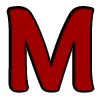
<style>
.page{position:relative;width:100px;height:100px;background:#ffffff}
.page>*{position:absolute;margin:0}
.t1{font:118.1px "Overlock-Bold";color:#9e0000;font-weight:bold}
</style>
<div class="page">
<p class="t1" style="left:8px;top:8px;width:85px;height:83px">M</p>
</div>
